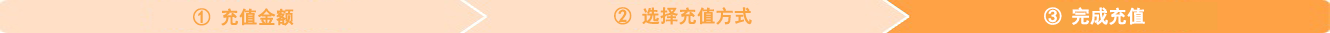
<style>
.page{position:relative;width:1330px;height:33px;background:#ffdfc6}
.page>*{position:absolute;margin:0}
.t1{font:18px "SimHei";color:#f9a543;font-weight:bold}
.t2{font:18px "SimHei";color:#ffffff;font-weight:bold}
</style>
<div class="page">
<p class="t1" style="left:193px;top:8px;width:101px;height:18px">① 充值金额</p>
<p class="t1" style="left:614px;top:7px;width:138px;height:18px">② 选择充值方式</p>
<p class="t2" style="left:1044px;top:7px;width:101px;height:18px">③ 完成充值</p>
</div>
